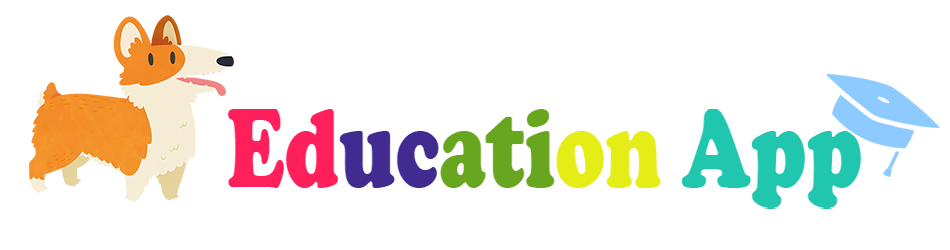
<style>
.page{position:relative;width:950px;height:250px;background:#ffffff}
.page>*{position:absolute;margin:0}
.t1{font:116.9px "CooperBlack";color:#68a61f;scale:0.71 1}
.t2{font:116.9px "CooperBlack";color:#ff205b;scale:0.71 1}
.t3{font:116.9px "CooperBlack";color:#412b90;scale:0.71 1}
.t4{font:116.9px "CooperBlack";color:#e5ed16;scale:0.71 1}
.t5{font:116.9px "CooperBlack";color:#21c6ae;scale:0.71 1}
</style>
<div class="page">
<p class="t1" style="left:228px;top:109px;width:633px;height:100px"><span class="t2">Ed</span><span class="t3">uc</span>ati<span class="t4">on </span><span class="t5">App</span></p>
</div>
